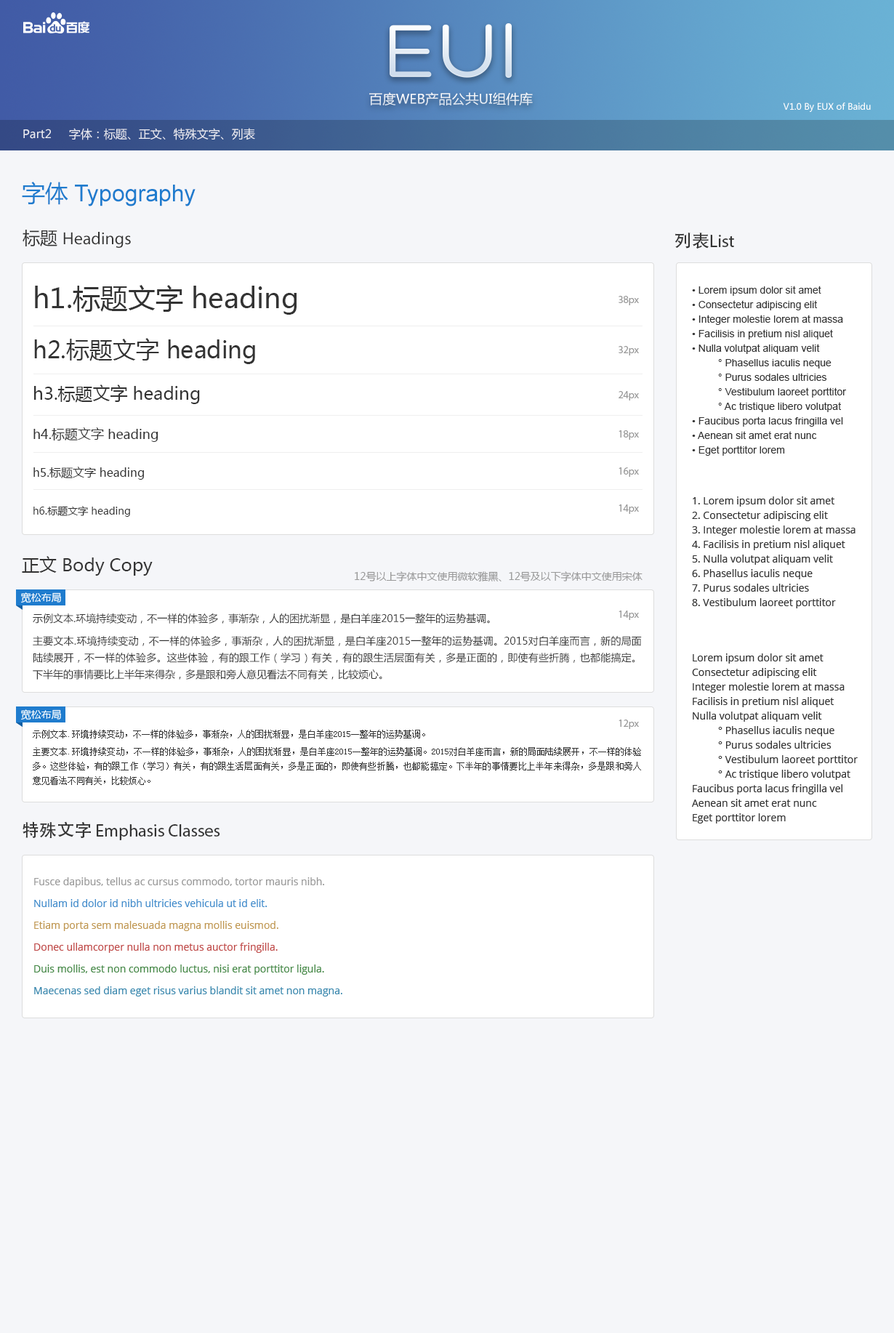
<style>
.page{position:relative;width:894px;height:1333px;background:#f5f6f9}
.page>*{position:absolute;margin:0}
.t1{font:13.1px "MicrosoftYaHeiUI";color:#ffffff}
.t2{font:8.7px "MicrosoftYaHei";color:#ffffff}
.t3{font:11.6px "MicrosoftYaHei";color:#ecedf3}
.t4{font:23.3px "ArialMT";color:#1f7cce}
.t5{font:23.3px "MicrosoftYaHei";color:#1f7cce}
.t6{font:17.4px "MyriadPro-Regular";color:#333333}
.t7{font:17.4px "MicrosoftYaHei";color:#333333}
.t8{font:17.4px "AdobeHeitiStd-Regular";color:#333333}
.t9{font:27.6px/50.2px "MicrosoftYaHei";color:#333333}
.t10{font:23.3px/50.2px "MicrosoftYaHei";color:#333333}
.t11{font:17.4px/41.4px "MicrosoftYaHei";color:#333333}
.t12{font:13.1px/39.3px "MicrosoftYaHei";color:#333333}
.t13{font:11.6px/37.8px "MicrosoftYaHei";color:#333333}
.t14{font:10.2px/37.8px "MicrosoftYaHei";color:#333333}
.t15{font:10.2px/14.5px "ArialMT";color:#333333}
.t16{font:10.2px/50.2px "MyriadPro-Regular";color:#999999}
.t17{font:10.2px/45.1px "MyriadPro-Regular";color:#999999}
.t18{font:10.2px/39.3px "MyriadPro-Regular";color:#999999}
.t19{font:10.2px/37.1px "MyriadPro-Regular";color:#999999}
.t20{font:10.2px/14.5px "OpenSans";color:#333333}
.t21{font:10.2px "MicrosoftYaHei";color:#999999}
.t22{font:10.2px/16.7px "MicrosoftYaHei";color:#333333}
.t23{font:10.2px/109.1px "MyriadPro-Regular";color:#999999}
.t24{font:8.7px/14.5px "SimSun";color:#333333}
.t25{font:10.2px "OpenSans";color:#999999}
.t26{font:10.2px "OpenSans";color:#468dc9}
.t27{font:10.2px "OpenSans";color:#bf9758}
.t28{font:10.2px "OpenSans";color:#bd4b4b}
.t29{font:10.2px "OpenSans";color:#48874a}
.t30{font:10.2px "OpenSans";color:#3e88ac}
</style>
<div class="page">
<p class="t1" style="left:369px;top:92px;width:164px;height:13px">百度WEB产品公共UI组件库</p>
<p class="t2" style="left:783px;top:103px;width:88px;height:9px">V1.0 By EUX of Baidu</p>
<p class="t3" style="left:23px;top:128px;width:232px;height:12px">Part2     字体：标题、正文、特殊文字、列表</p>
<p class="t4" style="left:22px;top:182px;width:174px;height:24px"><span class="t5">字体</span> Typography</p>
<p class="t6" style="left:23px;top:230px;width:108px;height:18px"><span class="t7">标题 </span>Headings</p>
<p class="t6" style="left:675px;top:233px;width:59px;height:16px"><span class="t8">列表</span>List</p>
<p class="t9" style="left:33px;top:285px;width:264px;height:232px">h1.标题文字 heading<br><span class="t10">h2.标题文字 heading<br></span><span class="t11">h3.标题文字 heading<br></span><span class="t12">h4.标题文字 heading<br></span><span class="t13">h5.标题文字 heading<br></span><span class="t14">h6.标题文字 heading</span></p>
<p class="t15" style="left:692px;top:286px;width:155px;height:170px">• Lorem ipsum dolor sit amet<br>• Consectetur adipiscing elit<br>• Integer molestie lorem at massa<br>• Facilisis in pretium nisl aliquet<br>• Nulla volutpat aliquam velit<br> ° Phasellus iaculis neque<br> ° Purus sodales ultricies<br> ° Vestibulum laoreet porttitor<br> ° Ac tristique libero volutpat<br>• Faucibus porta lacus fringilla vel<br>• Aenean sit amet erat nunc<br>• Eget porttitor lorem</p>
<p class="t16" style="left:619px;top:296px;width:20px;height:218px;text-align:right">38px<br>32px<br><span class="t17">24px<br></span><span class="t18">18px<br></span><span class="t19">16px<br>14px</span></p>
<p class="t20" style="left:692px;top:497px;width:164px;height:112px">1. Lorem ipsum dolor sit amet<br>2. Consectetur adipiscing elit<br>3. Integer molestie lorem at massa<br>4. Facilisis in pretium nisl aliquet<br>5. Nulla volutpat aliquam velit<br>6. Phasellus iaculis neque<br>7. Purus sodales ultricies<br>8. Vestibulum laoreet porttitor</p>
<p class="t7" style="left:22px;top:556px;width:131px;height:20px">正文 Body Copy</p>
<p class="t21" style="left:355px;top:571px;width:288px;height:11px">12号以上字体中文使用微软雅黑、12号及以下字体中文使用宋体</p>
<p class="t22" style="left:33px;top:613px;width:609px;height:67px;text-align:justify">示例文本.环境持续变动，不一样的体验多，事渐杂，人的困扰渐显，是白羊座2015一整年的运势基调。<br>主要文本.环境持续变动，不一样的体验多，事渐杂，人的困扰渐显，是白羊座2015一整年的运势基调。2015对白羊座而言，新的局面陆续展开，不一样的体验多。这些体验，有的跟工作（学习）有关，有的跟生活层面有关，多是正面的，即使有些折腾，也都能搞定。下半年的事情要比上半年来得杂，多是跟和旁人意见看法不同有关，比较烦心。</p>
<p class="t23" style="left:619px;top:611px;width:20px;height:118px;text-align:right">14px<br>12px</p>
<p class="t20" style="left:692px;top:654px;width:166px;height:170px">Lorem ipsum dolor sit amet<br>Consectetur adipiscing elit<br>Integer molestie lorem at massa<br>Facilisis in pretium nisl aliquet<br>Nulla volutpat aliquam velit<br> ° Phasellus iaculis neque<br> ° Purus sodales ultricies<br> ° Vestibulum laoreet porttitor<br> ° Ac tristique libero volutpat<br>Faucibus porta lacus fringilla vel<br>Aenean sit amet erat nunc<br>Eget porttitor lorem</p>
<p class="t24" style="left:33px;top:730px;width:608px;height:55px;text-align:justify">示例文本.环境持续变动，不一样的体验多，事渐杂，人的困扰渐显，是白羊座2015一整年的运势基调。<br>主要文本.环境持续变动，不一样的体验多，事渐杂，人的困扰渐显，是白羊座2015一整年的运势基调。2015对白羊座而言，新的局面陆续展开，不一样的体验多。这些体验，有的跟工作（学习）有关，有的跟生活层面有关，多是正面的，即使有些折腾，也都能搞定。下半年的事情要比上半年来得杂，多是跟和旁人意见看法不同有关，比较烦心。</p>
<p class="t6" style="left:23px;top:822px;width:197px;height:18px"><span class="t8">特殊文字 </span>Emphasis Classes</p>
<p class="t25" style="left:34px;top:878px;width:290px;height:10px">Fusce dapibus, tellus ac cursus commodo, tortor mauris nibh.</p>
<p class="t26" style="left:34px;top:899px;width:233px;height:8px">Nullam id dolor id nibh ultricies vehicula ut id elit.</p>
<p class="t27" style="left:34px;top:921px;width:244px;height:10px">Etiam porta sem malesuada magna mollis euismod.</p>
<p class="t28" style="left:34px;top:943px;width:244px;height:10px">Donec ullamcorper nulla non metus auctor fringilla.</p>
<p class="t29" style="left:34px;top:965px;width:290px;height:10px">Duis mollis, est non commodo luctus, nisi erat porttitor ligula.</p>
<p class="t30" style="left:34px;top:987px;width:308px;height:10px">Maecenas sed diam eget risus varius blandit sit amet non magna.</p>
</div>
